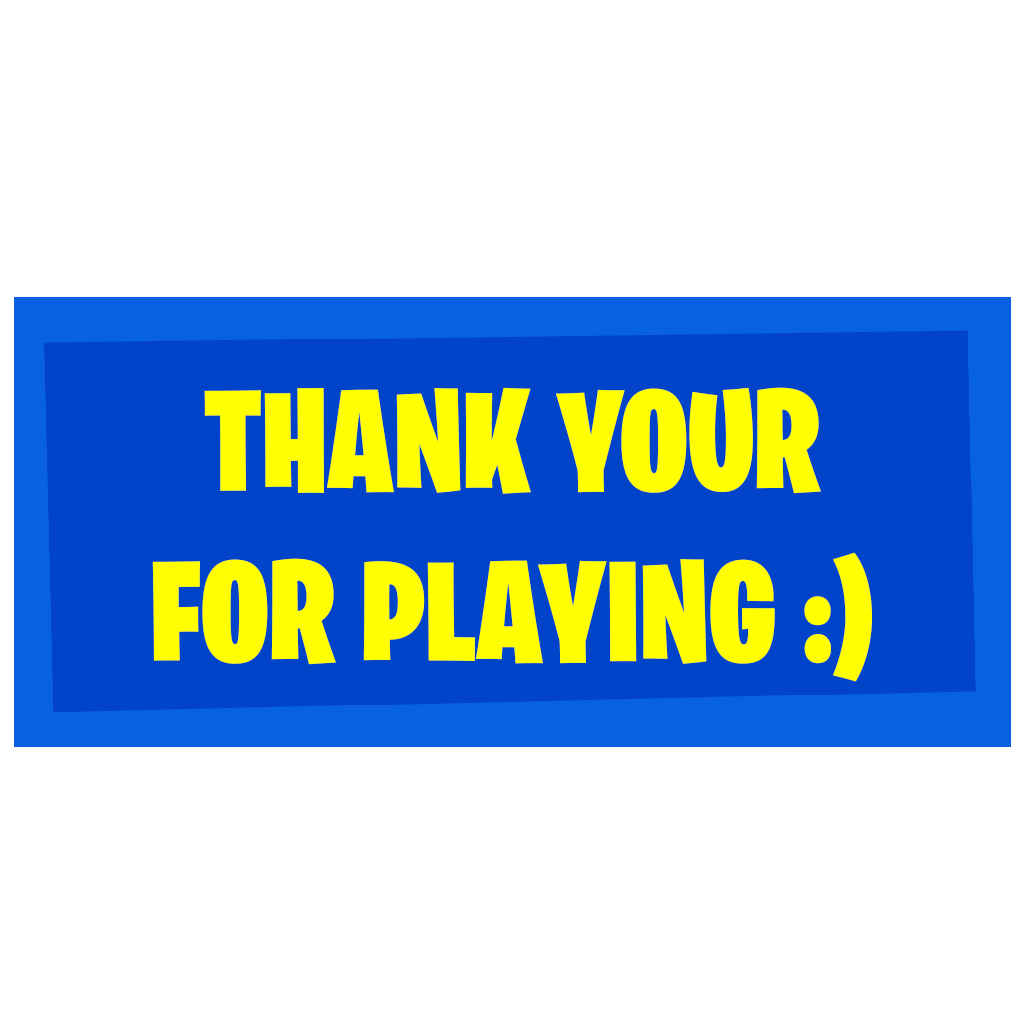
<style>
.page{position:relative;width:1024px;height:1024px;background:#ffffff}
.page>*{position:absolute;margin:0}
.t1{font:142.8px "BurbankBigCondensed-Black";color:#ffff01}
</style>
<div class="page">
<p class="t1" style="left:152px;top:387px;width:720px;height:295px;text-align:center">THANK YOUR<br>FOR PLAYING :)</p>
</div>
